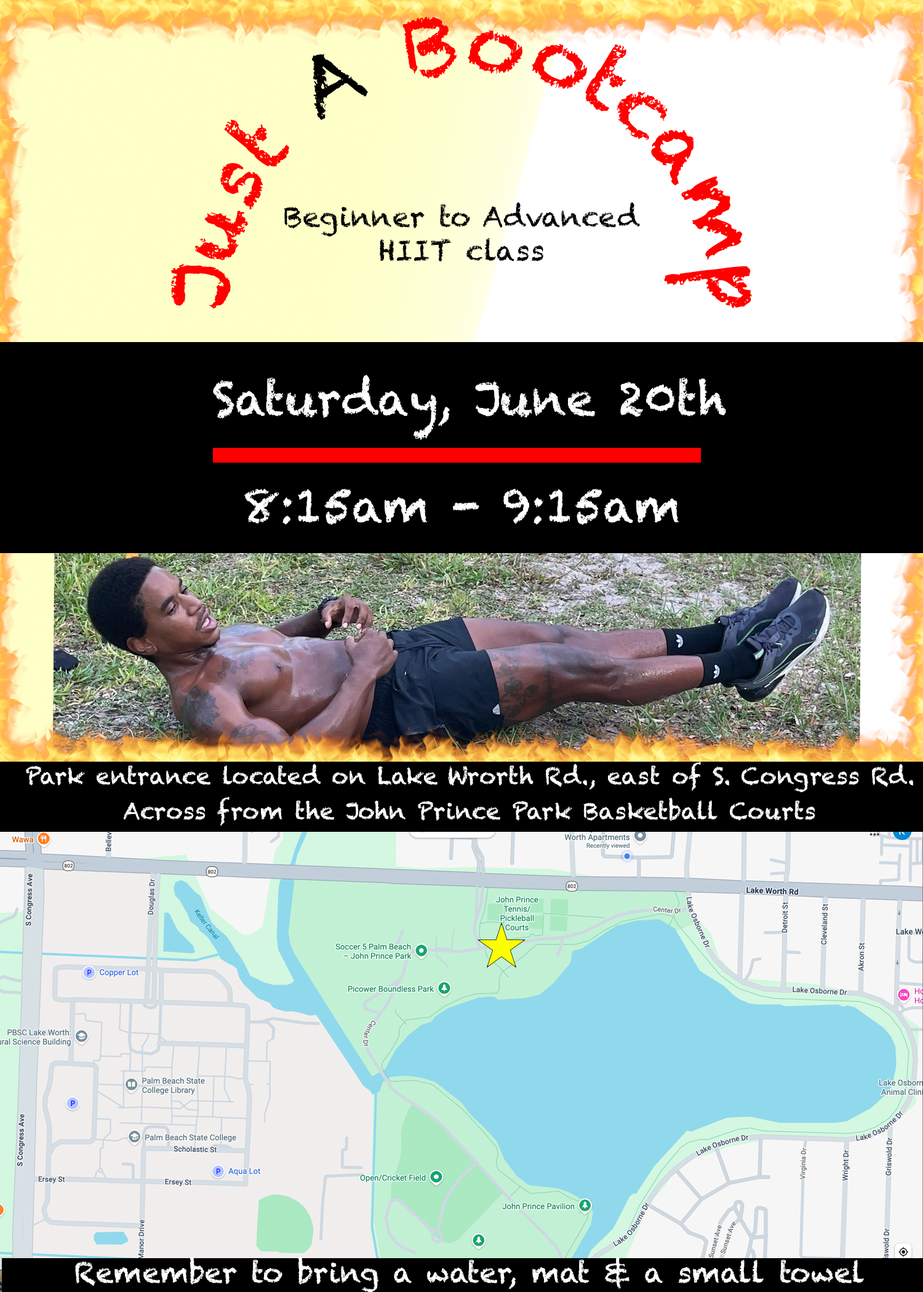
<style>
.page{position:relative;width:923px;height:1292px}
.page>*{position:absolute;margin:0}
.t1{font:50.2px "Chalkduster";color:#ff0000}
.t2{font:50.2px "Chalkduster";color:#000000}
.t3{font:28.2px "Chalkduster";color:#000000}
.t4{font:46.1px "Chalkduster";color:#ffffff}
.t5{font:23.1px "Chalkduster";color:#ffffff}
.t6{font:28.2px "Chalkduster";color:#ffffff}
</style>
<div class="page">
<p class="t1" style="left:170px;top:16px;width:582px;height:293px;text-align:center">Just <span class="t2">A </span>Bootcamp</p>
<p class="t3" style="left:284px;top:202px;width:356px;height:60px;text-align:center">Beginner to Advanced HIIT class</p>
<p class="t4" style="left:213px;top:375px;width:513px;height:66px">Saturday, June 20th</p>
<p class="t4" style="left:244px;top:489px;width:435px;height:36px">8:15am - 9:15am</p>
<p class="t5" style="left:26px;top:762px;width:887px;height:30px">Park entrance located on Lake Wrorth Rd., east of S. Congress Rd.</p>
<p class="t5" style="left:124px;top:797px;width:691px;height:29px">Across from the John Prince Park Basketball Courts</p>
<p class="t6" style="left:75px;top:1256px;width:789px;height:37px">Remember to bring a water, mat &amp; a small towel</p>
</div>
